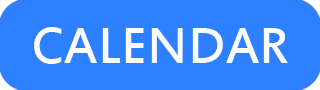
<style>
.page{position:relative;width:320px;height:90px;background:#2d80ff}
.page>*{position:absolute;margin:0}
.t1{font:56px "EstrangeloEdessa";color:#ffffff}
</style>
<div class="page">
<p class="t1" style="left:34px;top:27px;width:254px;height:37px">CALENDAR</p>
</div>
